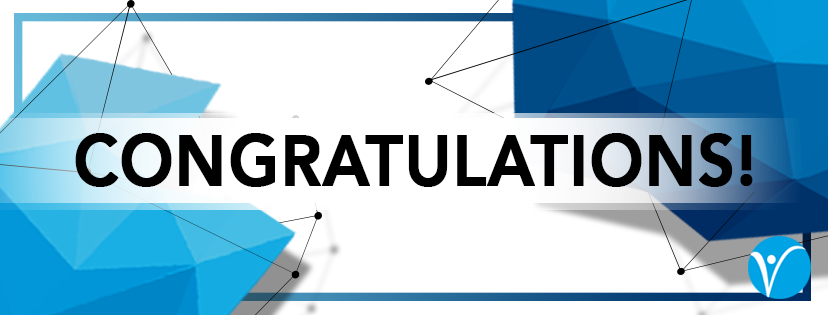
<style>
.page{position:relative;width:828px;height:315px;background:#ffffff}
.page>*{position:absolute;margin:0}
.t1{font:70.8px "Avenir-Heavy";letter-spacing:0.01em;color:#000000;font-weight:bold;scale:0.9 1}
</style>
<div class="page">
<p class="t1" style="left:75px;top:133px;width:678px;height:54px">CONGRATULATIONS!</p>
</div>
